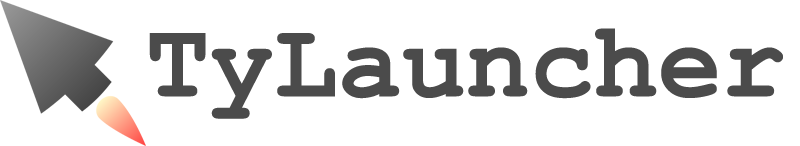
<style>
.page{position:relative;width:800px;height:146px;background:#ffffff}
.page>*{position:absolute;margin:0}
.t1{font:106.7px "CourierNewPS-BoldMT";color:#4b4b4b}
</style>
<div class="page">
<p class="t1" style="left:149px;top:28px;width:634px;height:91px">TyLauncher</p>
</div>
